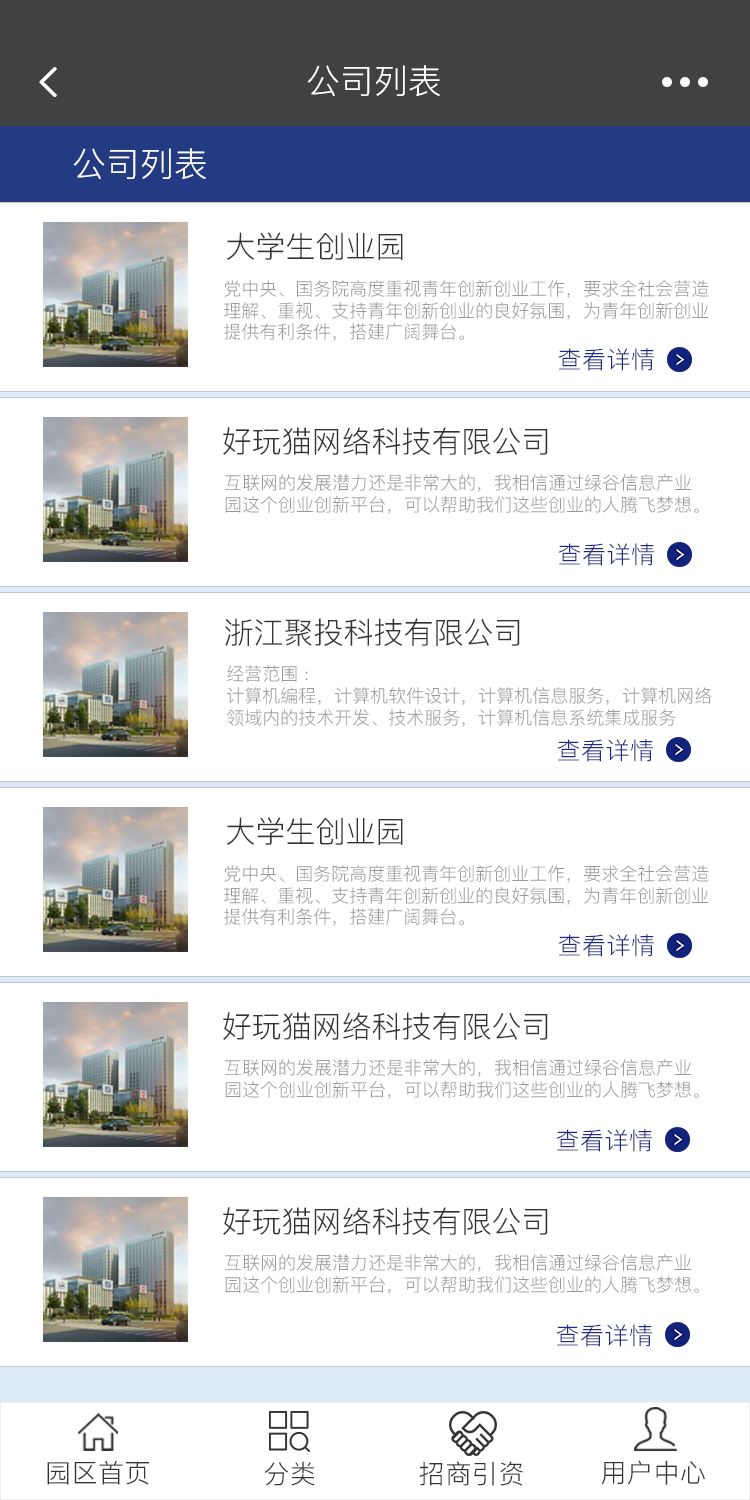
<style>
.page{position:relative;width:750px;height:1500px;background:#ffffff}
.page>*{position:absolute;margin:0}
.t1{font:34px "PingFang-SC-Regular";color:#ffffff}
.t2{font:30px "PingFang-SC-Regular";color:#333333}
.t3{font:18px "PingFang-SC-Regular";color:#999999}
.t4{font:24px "PingFang-SC-Regular";letter-spacing:0.02em;color:#1e2a82}
.t5{font:26px "PingFang-SC-Regular";letter-spacing:0.02em;color:#333333}
</style>
<div class="page">
<p class="t1" style="left:307px;top:65px;width:133px;height:32px">公司列表</p>
<p class="t1" style="left:73px;top:148px;width:133px;height:32px">公司列表</p>
<p class="t2" style="left:226px;top:232px;width:177px;height:28px">大学生创业园</p>
<p class="t3" style="left:224px;top:280px;width:485px;height:61px">党中央、国务院高度重视青年创新创业工作，要求全社会营造<br>理解、重视、支持青年创新创业的良好氛围，为青年创新创业<br>提供有利条件，搭建广阔舞台。</p>
<p class="t4" style="left:558px;top:348px;width:96px;height:23px">查看详情</p>
<p class="t2" style="left:223px;top:427px;width:325px;height:28px">好玩猫网络科技有限公司</p>
<p class="t3" style="left:225px;top:474px;width:474px;height:40px">互联网的发展潜力还是非常大的，我相信通过绿谷信息产业<br>园这个创业创新平台，可以帮助我们这些创业的人腾飞梦想。</p>
<p class="t4" style="left:558px;top:543px;width:96px;height:23px">查看详情</p>
<p class="t2" style="left:225px;top:618px;width:295px;height:28px">浙江聚投科技有限公司</p>
<p class="t3" style="left:227px;top:665px;width:485px;height:62px">经营范围 :<br>计算机编程，计算机软件设计，计算机信息服务，计算机网络<br>领域内的技术开发、技术服务，计算机信息系统集成服务</p>
<p class="t4" style="left:557px;top:739px;width:96px;height:23px">查看详情</p>
<p class="t2" style="left:226px;top:817px;width:177px;height:28px">大学生创业园</p>
<p class="t3" style="left:224px;top:865px;width:485px;height:61px">党中央、国务院高度重视青年创新创业工作，要求全社会营造<br>理解、重视、支持青年创新创业的良好氛围，为青年创新创业<br>提供有利条件，搭建广阔舞台。</p>
<p class="t4" style="left:558px;top:934px;width:96px;height:23px">查看详情</p>
<p class="t2" style="left:223px;top:1012px;width:325px;height:28px">好玩猫网络科技有限公司</p>
<p class="t3" style="left:225px;top:1059px;width:474px;height:40px">互联网的发展潜力还是非常大的，我相信通过绿谷信息产业<br>园这个创业创新平台，可以帮助我们这些创业的人腾飞梦想。</p>
<p class="t4" style="left:556px;top:1129px;width:96px;height:23px">查看详情</p>
<p class="t2" style="left:223px;top:1207px;width:325px;height:28px">好玩猫网络科技有限公司</p>
<p class="t3" style="left:225px;top:1254px;width:474px;height:40px">互联网的发展潜力还是非常大的，我相信通过绿谷信息产业<br>园这个创业创新平台，可以帮助我们这些创业的人腾飞梦想。</p>
<p class="t4" style="left:556px;top:1324px;width:96px;height:23px">查看详情</p>
<p class="t5" style="left:47px;top:1460px;width:102px;height:25px">园区首页</p>
<p class="t5" style="left:264px;top:1461px;width:51px;height:25px">分类</p>
<p class="t5" style="left:419px;top:1461px;width:104px;height:25px">招商引资</p>
<p class="t5" style="left:601px;top:1460px;width:104px;height:25px">用户中心</p>
</div>
